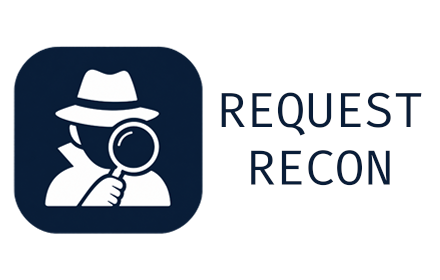
<style>
.page{position:relative;width:440px;height:280px;background:#ffffff}
.page>*{position:absolute;margin:0}
.t1{font:48px "FiraCode-Regular";color:#091d38}
</style>
<div class="page">
<p class="t1" style="left:220px;top:92px;width:203px;height:95px;text-align:center">REQUEST<br>RECON</p>
</div>
